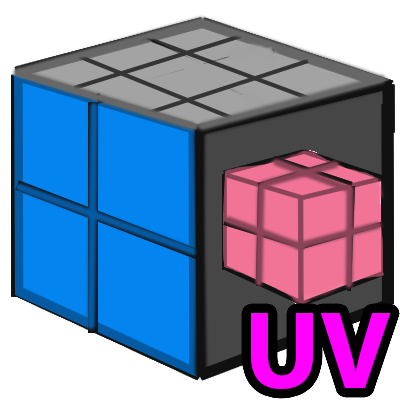
<style>
.page{position:relative;width:400px;height:400px;background:#ffffff}
.page>*{position:absolute;margin:0}
.t1{font:111.5px "MyriadPro-Bold";color:#ff00ff}
</style>
<div class="page">
<p class="t1" style="left:251px;top:313px;width:140px;height:76px">UV</p>
</div>
